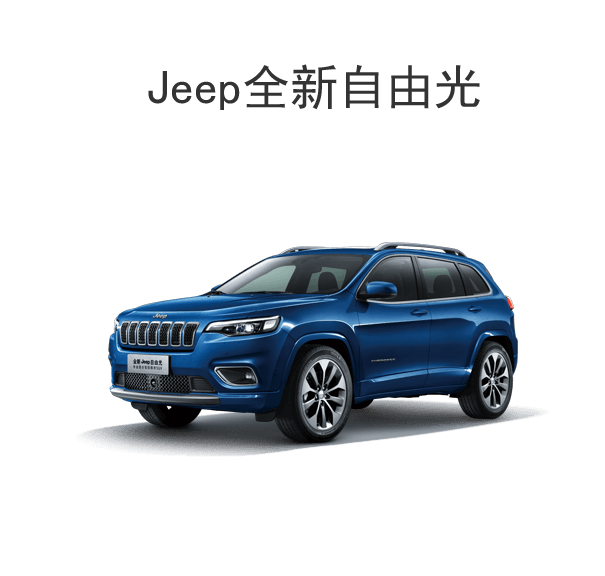
<style>
.page{position:relative;width:605px;height:576px;background:#ffffff}
.page>*{position:absolute;margin:0}
.t1{font:48px "SimHei";color:#333333}
</style>
<div class="page">
<p class="t1" style="left:148px;top:64px;width:332px;height:46px">Jeep全新自由光</p>
</div>
